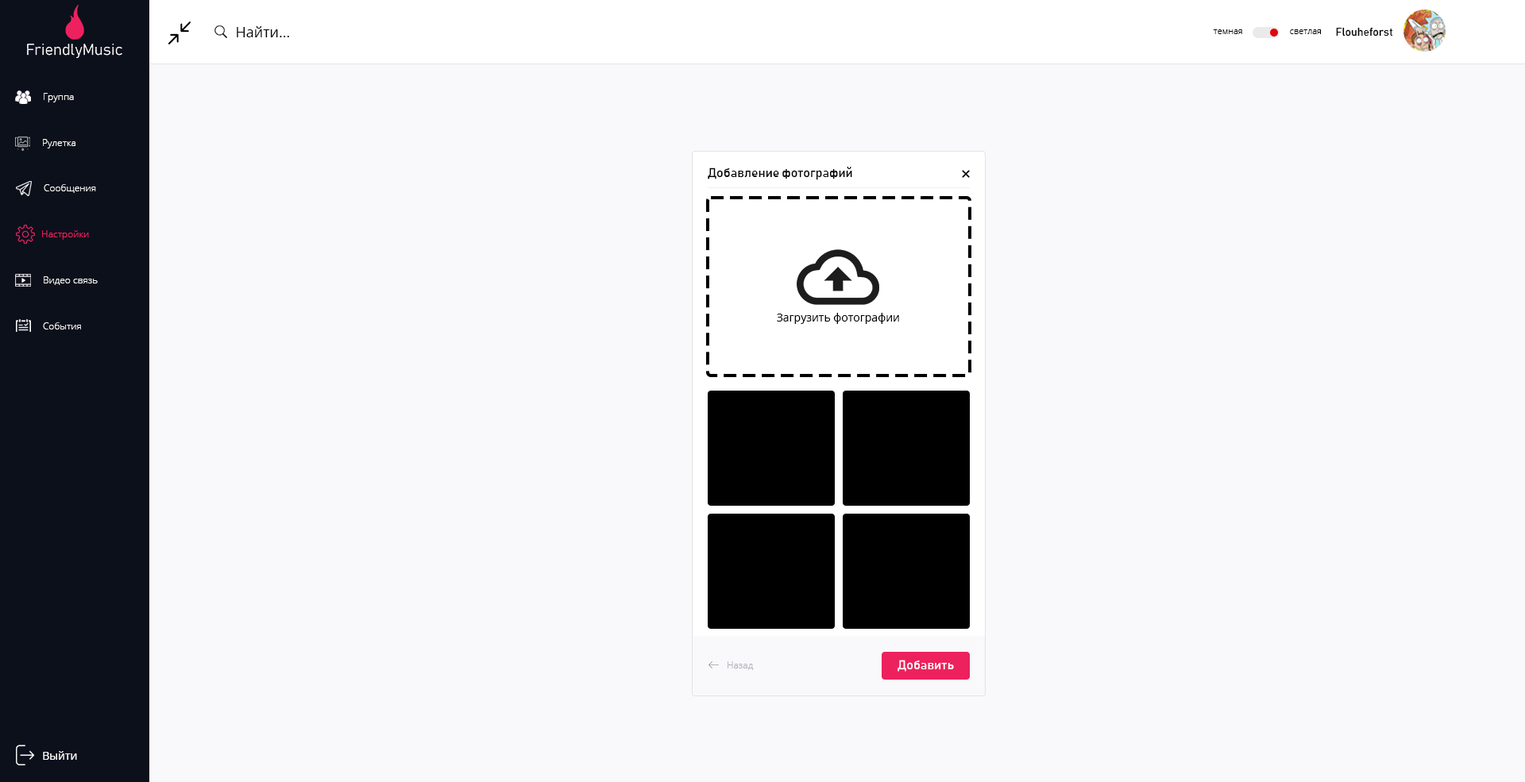
<style>
.page{position:relative;width:1525px;height:782px;background:#f9f9fb}
.page>*{position:absolute;margin:0}
.t1{font:14.3px "OpenSans";color:#000000}
.t2{font:8.7px "OpenSans-Light";color:#000000}
.t3{font:11.1px "Bahnschrift";color:#000000}
.t4{font:9.5px "OpenSans-Light";color:#ffffff}
.t5{font:12.7px "Bahnschrift";color:#000000}
.t6{font:9.5px "OpenSans-Light";color:#ed215e}
.t7{font:11.1px "OpenSans";color:#000000}
.t8{font:9.5px "OpenSans-Light";color:#afafb7}
.t9{font:12.7px "Bahnschrift";color:#ffffff}
.t10{font:11.1px "OpenSans";color:#ffffff}
</style>
<div class="page">
<p class="t1" style="left:237px;top:26px;width:52px;height:11px">Найти...</p>
<p class="t2" style="left:1213px;top:29px;width:29px;height:5px">темная</p>
<p class="t2" style="left:1290px;top:29px;width:31px;height:5px">светлая</p>
<p class="t3" style="left:1336px;top:27px;width:57px;height:10px">Flouheforst</p>
<p class="t4" style="left:44px;top:93px;width:30px;height:9px">Группа</p>
<p class="t4" style="left:43px;top:139px;width:32px;height:9px">Рулетка</p>
<p class="t5" style="left:707px;top:167px;width:145px;height:13px">Добавление фотографий</p>
<p class="t4" style="left:44px;top:184px;width:52px;height:9px">Сообщения</p>
<p class="t6" style="left:42px;top:230px;width:47px;height:10px">Настройки</p>
<p class="t4" style="left:44px;top:276px;width:54px;height:9px">Видео связь</p>
<p class="t7" style="left:777px;top:313px;width:122px;height:11px">Загрузить фотографии</p>
<p class="t4" style="left:43px;top:322px;width:38px;height:8px">События</p>
<p class="t8" style="left:727px;top:661px;width:27px;height:9px">Назад</p>
<p class="t9" style="left:897px;top:660px;width:57px;height:12px">Добавить</p>
<p class="t10" style="left:43px;top:751px;width:34px;height:9px">Выйти</p>
</div>
